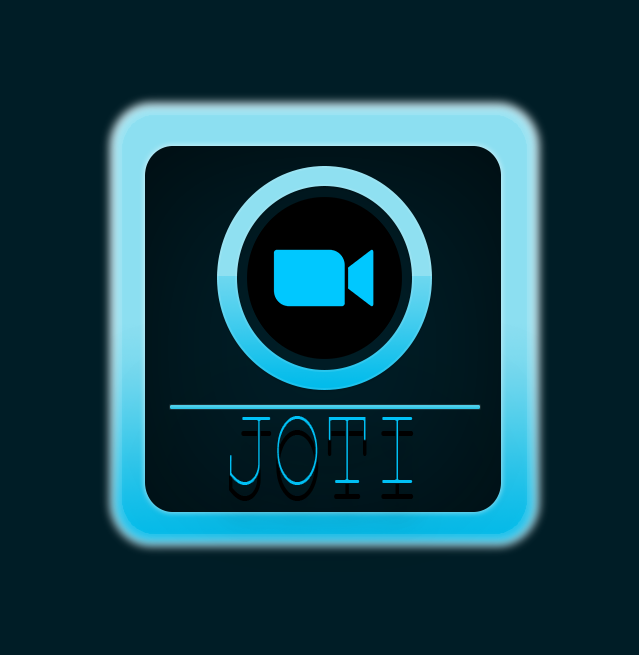
<style>
.page{position:relative;width:639px;height:655px;background:#001d26}
.page>*{position:absolute;margin:0}
.t1{font:119.3px "CourierNewPSMT";scale:0.7 1}
</style>
<div class="page">
<p class="t1" style="left:229px;top:415px;width:185px;height:71px">JOTI</p>
</div>
